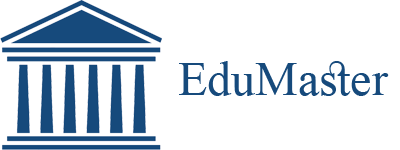
<style>
.page{position:relative;width:400px;height:150px;background:#ffffff}
.page>*{position:absolute;margin:0}
.t1{font:48px "TimesNewRomanPSMT";color:#164a7c}
</style>
<div class="page">
<p class="t1" style="left:179px;top:61px;width:210px;height:35px">EduMaster</p>
</div>
